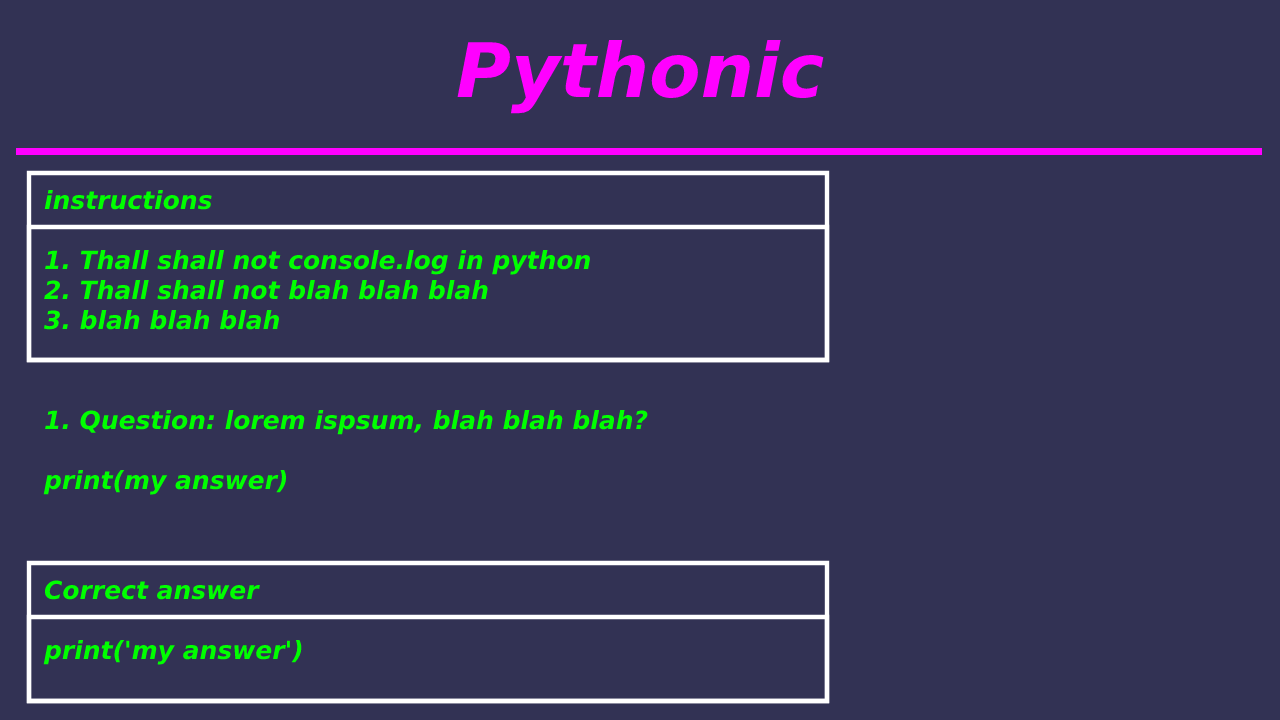
<style>
.page{position:relative;width:1280px;height:720px;background:#323254}
.page>*{position:absolute;margin:0}
.t1{font:75px "DejaVuSans-BoldOblique";color:#ff00ff}
.t2{font:25px "DejaVuSans-BoldOblique";color:#00ff00}
</style>
<div class="page">
<p class="t1" style="left:457px;top:40px;width:367px;height:74px">Pythonic</p>
<p class="t2" style="left:44px;top:190px;width:546px;height:140px">instructions<br><br>1. Thall shall not console.log in python<br>2. Thall shall not blah blah blah<br>3. blah blah blah</p>
<p class="t2" style="left:43px;top:410px;width:605px;height:85px">1. Question: lorem ispsum, blah blah blah?<br><br>print(my answer)</p>
<p class="t2" style="left:43px;top:580px;width:259px;height:85px">Correct answer<br><br>print('my answer')</p>
</div>
